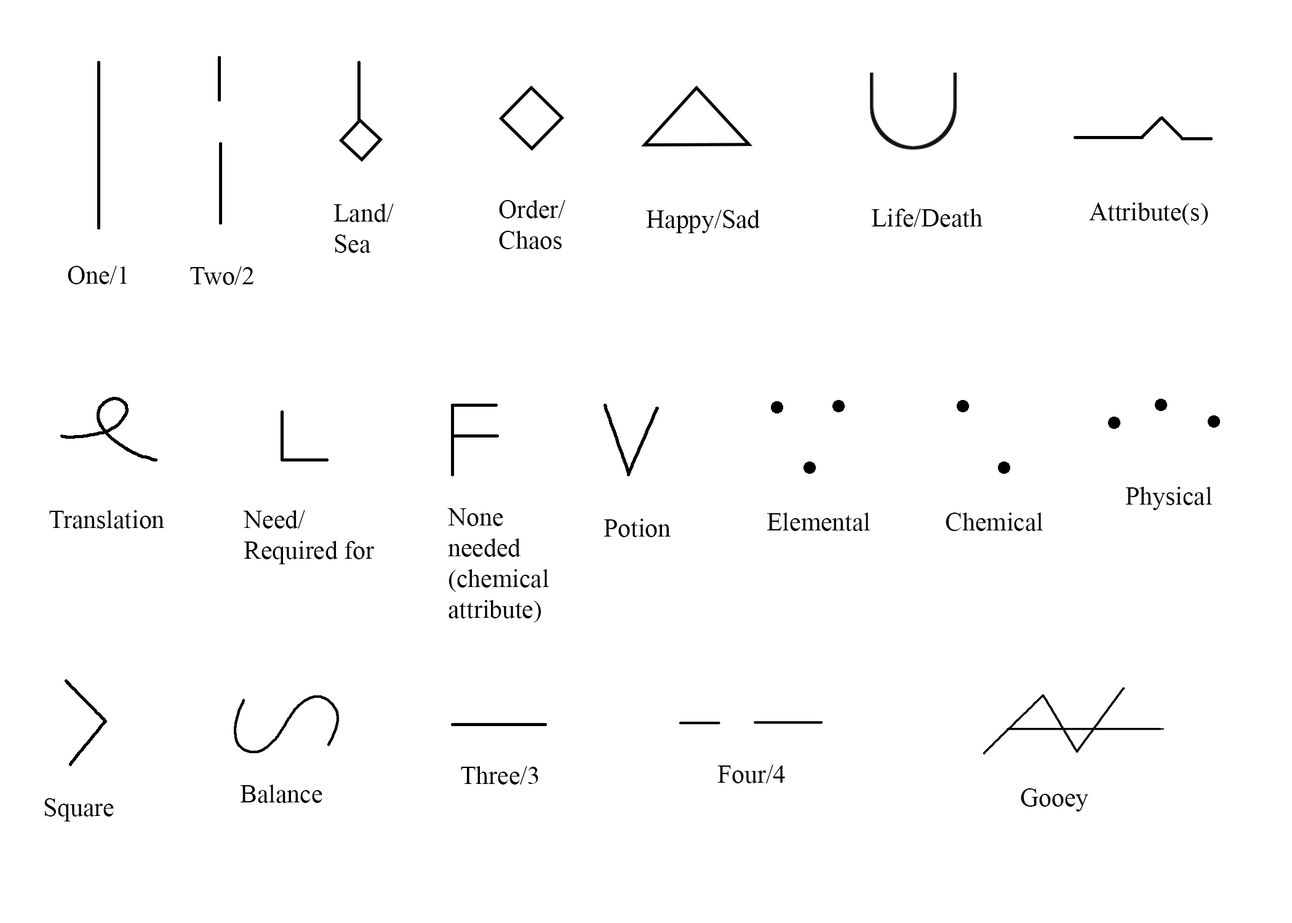
<style>
.page{position:relative;width:1292px;height:923px;background:#ffffff}
.page>*{position:absolute;margin:0}
.t1{font:25.6px "TimesNewRomanPSMT";color:#000000}
</style>
<div class="page">
<p class="t1" style="left:333px;top:204px;width:61px;height:49px">Land/<br>Sea</p>
<p class="t1" style="left:499px;top:200px;width:66px;height:49px">Order/<br>Chaos</p>
<p class="t1" style="left:646px;top:210px;width:114px;height:23px">Happy/Sad</p>
<p class="t1" style="left:871px;top:209px;width:112px;height:18px">Life/Death</p>
<p class="t1" style="left:1089px;top:202px;width:119px;height:23px">Attribute(s)</p>
<p class="t1" style="left:68px;top:266px;width:59px;height:18px">One/1</p>
<p class="t1" style="left:190px;top:266px;width:64px;height:19px">Two/2</p>
<p class="t1" style="left:1125px;top:487px;width:87px;height:23px">Physical</p>
<p class="t1" style="left:447px;top:508px;width:102px;height:115px">None<br>needed<br>(chemical<br>attribute)</p>
<p class="t1" style="left:49px;top:510px;width:115px;height:19px">Translation</p>
<p class="t1" style="left:243px;top:510px;width:131px;height:54px">Need/<br>Required for</p>
<p class="t1" style="left:604px;top:519px;width:67px;height:18px">Potion</p>
<p class="t1" style="left:767px;top:513px;width:103px;height:18px">Elemental</p>
<p class="t1" style="left:946px;top:513px;width:97px;height:18px">Chemical</p>
<p class="t1" style="left:461px;top:766px;width:77px;height:18px">Three/3</p>
<p class="t1" style="left:717px;top:765px;width:68px;height:18px">Four/4</p>
<p class="t1" style="left:240px;top:784px;width:82px;height:19px">Balance</p>
<p class="t1" style="left:44px;top:798px;width:70px;height:23px">Square</p>
<p class="t1" style="left:1021px;top:788px;width:67px;height:24px">Gooey</p>
</div>
